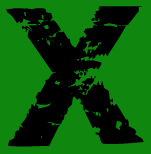
<style>
.page{position:relative;width:151px;height:154px;background:#0f870f}
.page>*{position:absolute;margin:0}
.t1{font:139.7px "Destroy";color:#000000;font-weight:bold}
</style>
<div class="page">
<p class="t1" style="left:6px;top:6px;width:138px;height:141px">X</p>
</div>
